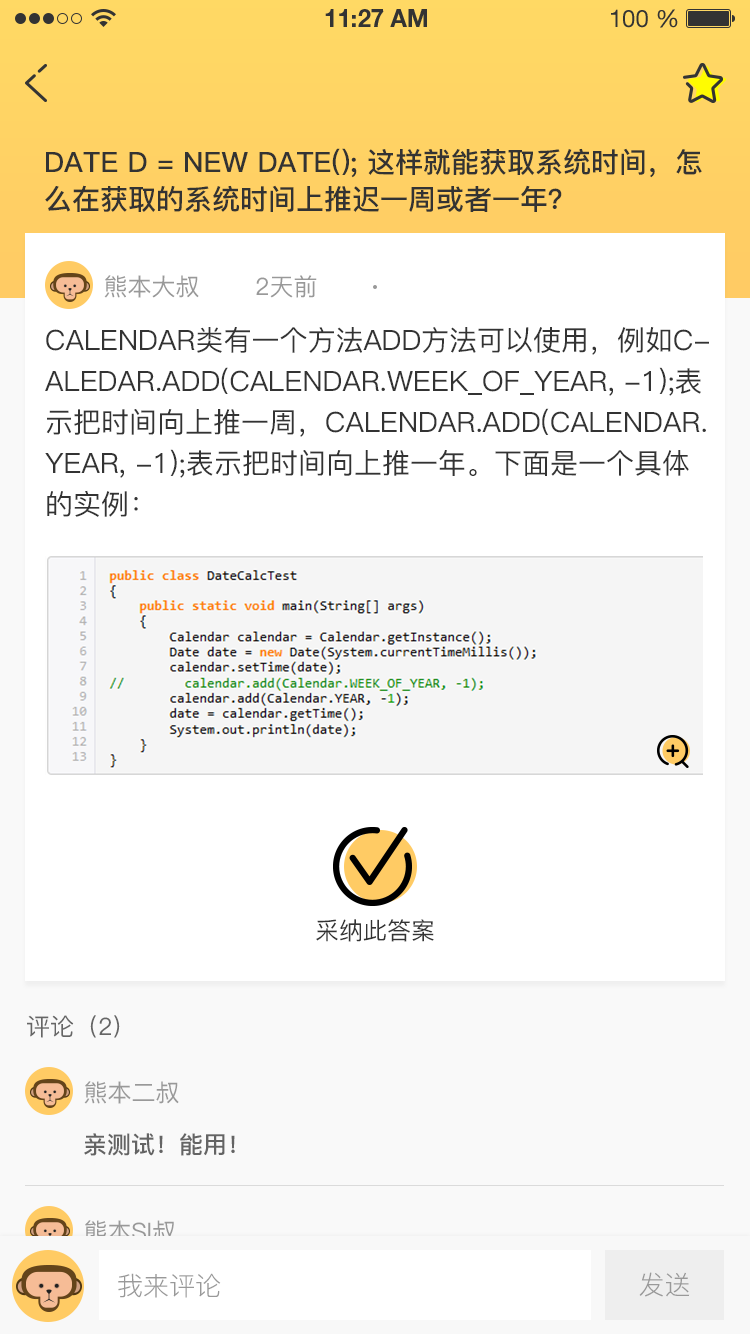
<style>
.page{position:relative;width:750px;height:1334px;background:#ffffff}
.page>*{position:absolute;margin:0}
.t1{font:28px/37px "PingFang-SC-Bold";color:#333333;text-transform:uppercase}
.t2{font:24px "PingFang-SC-Medium";color:#999999;text-transform:uppercase}
.t3{font:28px/41px "PingFang-SC-Medium";color:#333333;text-transform:uppercase}
.t4{font:24px "PingFang-SC-Medium";color:#333333;text-transform:uppercase}
.t5{font:24px "PingFang-SC-Medium";color:#666666;text-transform:uppercase}
.t6{font:24px "PingFang-SC-Bold";color:#646464;text-transform:uppercase}
.t7{font:26px "PingFang-SC-Regular";color:#999999;text-transform:uppercase}
</style>
<div class="page">
<p class="t1" style="left:45px;top:148px;width:657px;height:64px">Date d = new Date(); 这样就能获取系统时间，怎<br>么在获取的系统时间上推迟一周或者一年？</p>
<p class="t2" style="left:104px;top:275px;width:213px;height:23px">熊本大叔       2天前</p>
<p class="t3" style="left:45px;top:327px;width:664px;height:190px">Calendar类有一个方法add方法可以使用，例如c-<br>aledar.add(Calendar.WEEK_OF_YEAR, -1);表<br>示把时间向上推一周，calendar.add(Calendar.<br>YEAR, -1);表示把时间向上推一年。下面是一个具体<br>的实例：</p>
<p class="t4" style="left:316px;top:919px;width:118px;height:23px">采纳此答案</p>
<p class="t5" style="left:27px;top:1015px;width:93px;height:23px">评论（2）</p>
<p class="t2" style="left:84px;top:1081px;width:95px;height:23px">熊本二叔</p>
<p class="t6" style="left:84px;top:1133px;width:151px;height:23px">亲测试！能用！</p>
<p class="t2" style="left:84px;top:1220px;width:91px;height:23px">熊本si叔</p>
<p class="t7" style="left:118px;top:1273px;width:103px;height:25px">我来评论</p>
<p class="t7" style="left:639px;top:1272px;width:51px;height:25px">发送</p>
</div>
